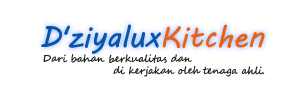
<style>
.page{position:relative;width:300px;height:100px;background:#ffffff}
.page>*{position:absolute;margin:0}
.t1{font:30px "MVBoli";color:#0556a9}
.t2{font:30px "MVBoli";color:#ea6211}
.t3{font:10px "SegoeScript";color:#202121}
</style>
<div class="page">
<p class="t1" style="left:41px;top:24px;width:224px;height:30px">D'ziyalux<span class="t2">Kitchen</span></p>
<p class="t3" style="left:43px;top:54px;width:222px;height:23px;text-align:center">Dari bahan berkualitas dan<br>     di kerjakan oleh tenaga ahli.</p>
</div>
